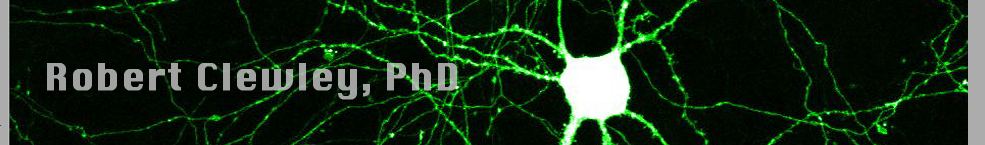
<style>
.page{position:relative;width:985px;height:145px}
.page>*{position:absolute;margin:0}
.t1{font:36px "Silom";letter-spacing:0.01em;color:#a1a2a1;font-weight:bold}
</style>
<div class="page">
<p class="t1" style="left:47px;top:63px;width:410px;height:37px">Robert Clewley, PhD</p>
</div>
